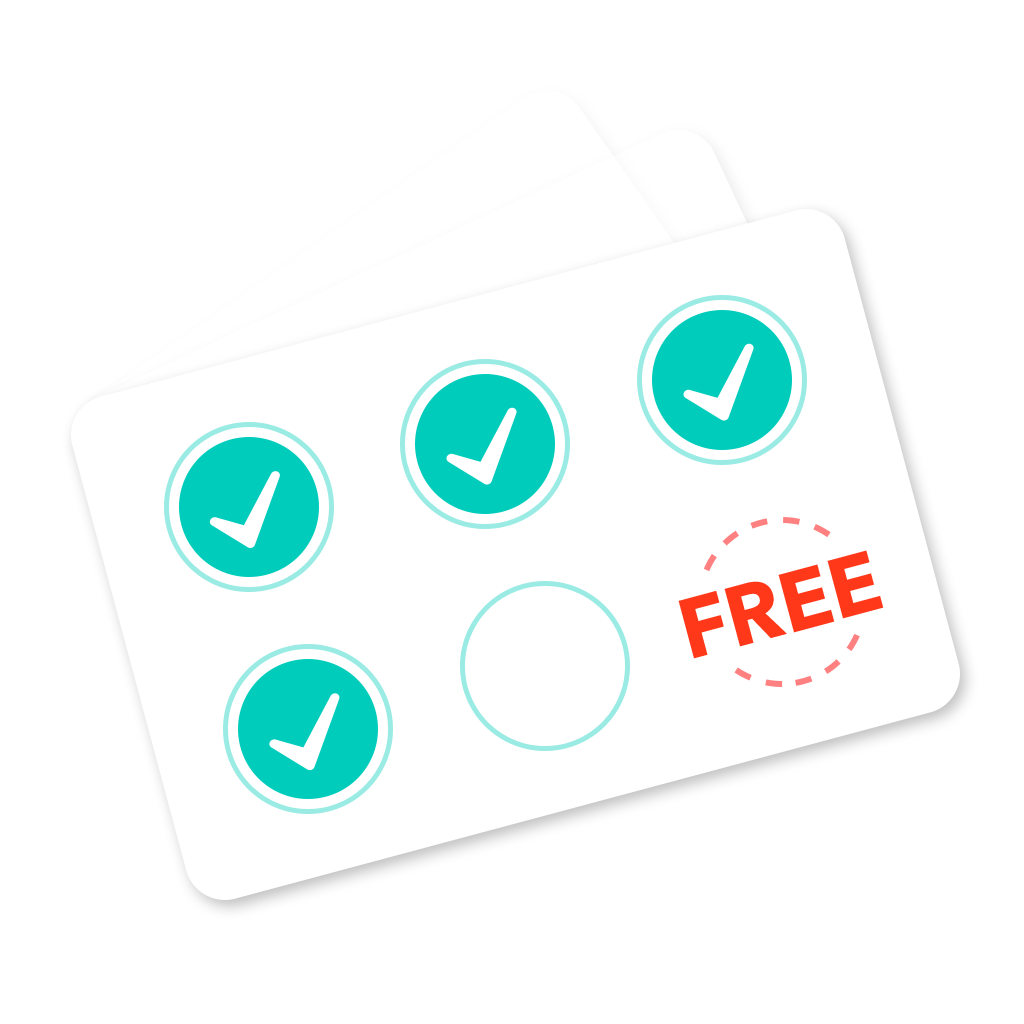
<style>
.page{position:relative;width:1024px;height:1024px;background:#ffffff}
.page>*{position:absolute;margin:0}
.t1{font:84px "AvenirNext-Bold";color:#ff381a}
</style>
<div class="page">
<p class="t1" style="left:678px;top:550px;width:206px;height:109px;rotate:-15deg">FREE</p>
</div>
